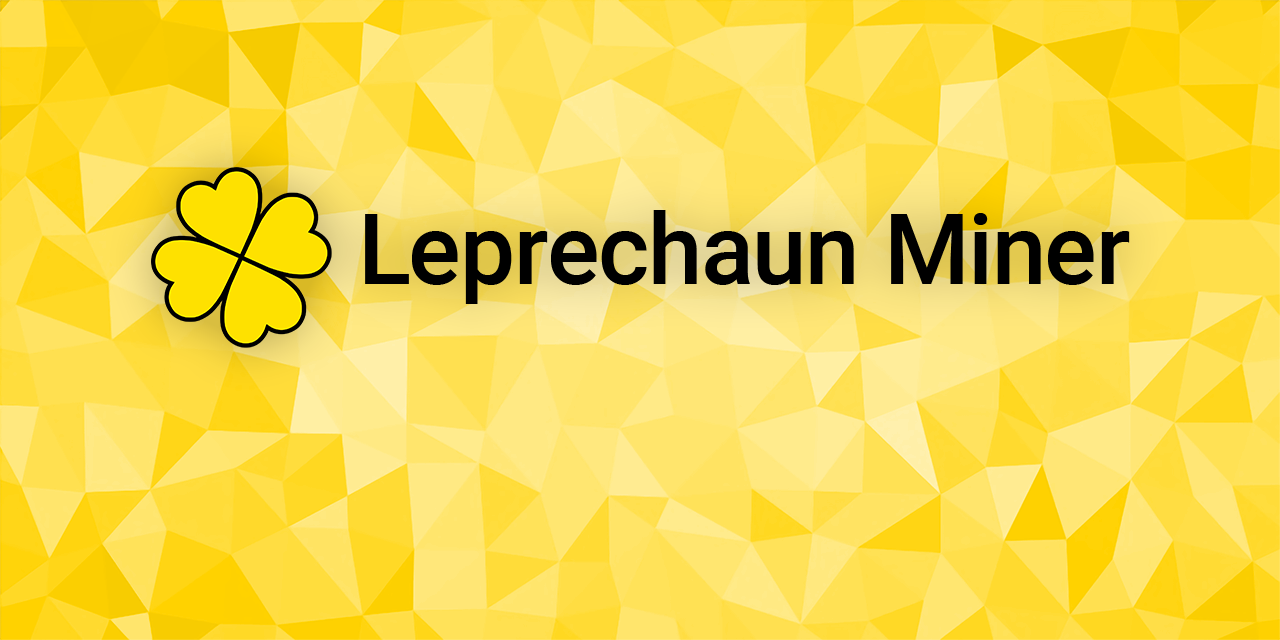
<style>
.page{position:relative;width:1280px;height:640px}
.page>*{position:absolute;margin:0}
.t1{font:98.2px "Roboto-Medium";color:#000000}
</style>
<div class="page">
<p class="t1" style="left:365px;top:210px;width:765px;height:94px">Leprechaun Miner</p>
</div>
